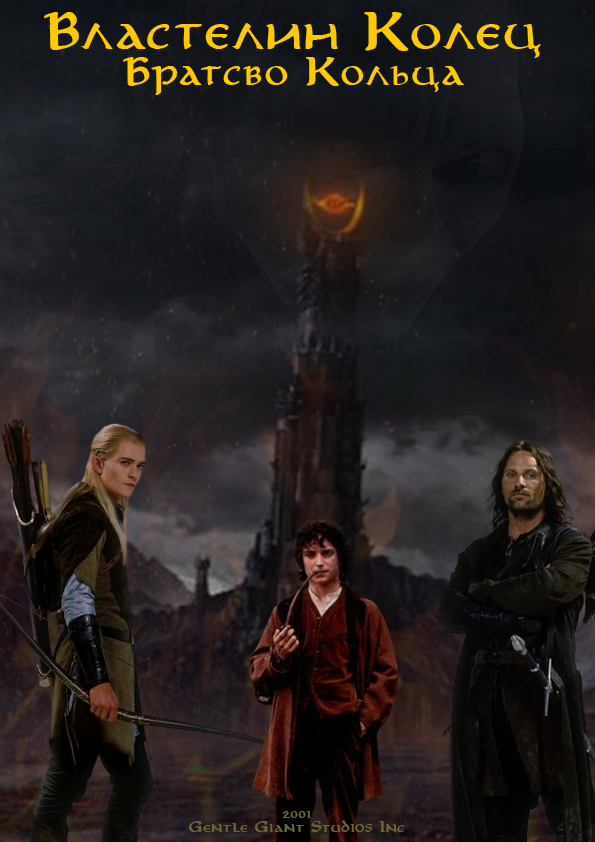
<style>
.page{position:relative;width:595px;height:842px}
.page>*{position:absolute;margin:0}
.t1{font:40px "Aniron-Bold";color:#ffc900}
.t2{font:30px "Aniron-Bold";color:#ffc900}
.t3{font:12px "Aniron-Bold";color:#6b663b}
</style>
<div class="page">
<p class="t1" style="left:44px;top:12px;width:497px;height:83px;text-align:center">Властелин Колец<br><span class="t2">Братсво Кольца</span></p>
<p class="t3" style="left:189px;top:811px;width:215px;height:21px;text-align:center">2001<br>Gentle Giant Studios Inc</p>
</div>
